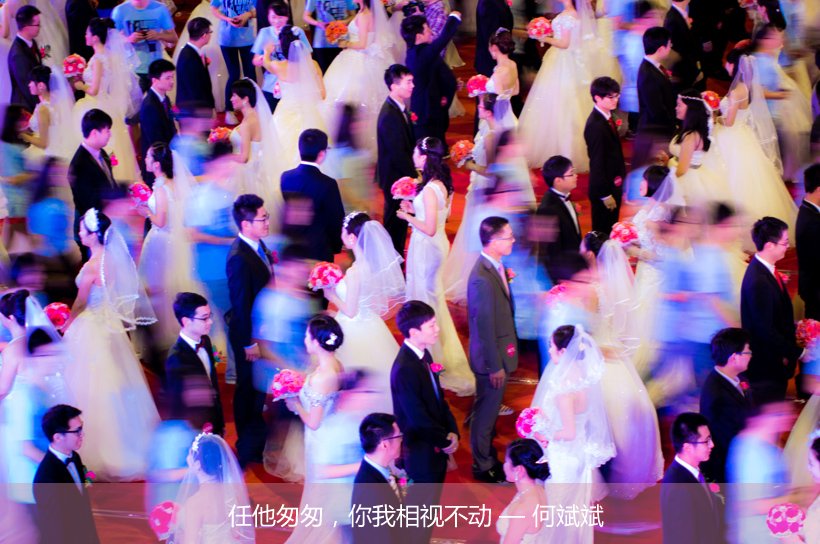
<style>
.page{position:relative;width:820px;height:544px}
.page>*{position:absolute;margin:0}
.t1{font:24px "MicrosoftYaHei";color:#ffffff}
</style>
<div class="page">
<p class="t1" style="left:228px;top:504px;width:376px;height:24px">任他匆匆，你我相视不动 — 何斌斌</p>
</div>
